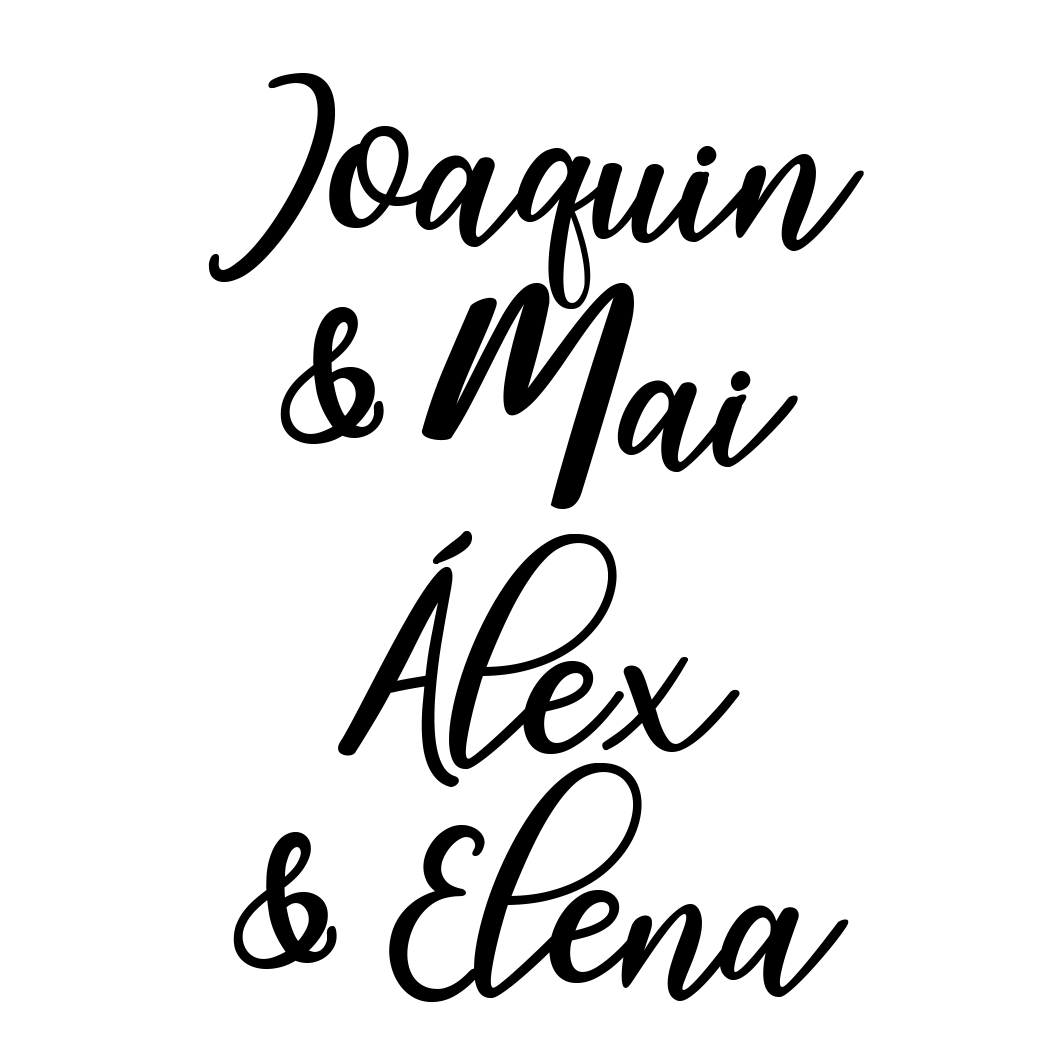
<style>
.page{position:relative;width:1063px;height:1063px;background:#ffffff}
.page>*{position:absolute;margin:0}
.t1{font:187.5px/225.1px "magic-Regular";letter-spacing:-0.04em;color:#000000}
.t2{font:187.5px/229.3px "magic-Regular";letter-spacing:-0.04em;color:#000000}
</style>
<div class="page">
<p class="t1" style="left:208px;top:73px;width:656px;height:436px;text-align:center">Joaquin<br>&amp; Mai</p>
<p class="t2" style="left:233px;top:531px;width:616px;height:471px;text-align:center">Álex<br>&amp; Elena</p>
</div>
